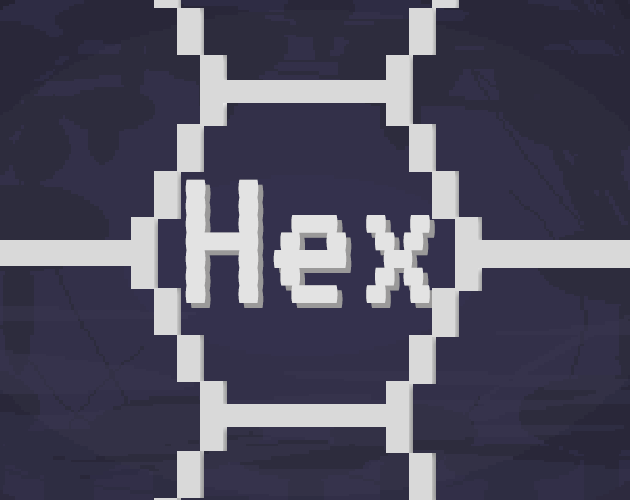
<style>
.page{position:relative;width:630px;height:500px;background:#333049}
.page>*{position:absolute;margin:0}
.t1{font:220px "VT323-Regular";color:#e3e3e3}
</style>
<div class="page">
<p class="t1" style="left:185px;top:179px;width:245px;height:124px">Hex</p>
<p class="t1" style="left:190px;top:184px;width:245px;height:124px">Hex</p>
</div>
